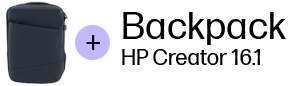
<style>
.page{position:relative;width:296px;height:86px;background:#ffffff}
.page>*{position:absolute;margin:0}
.t1{font:38px "FormaDJRMicro-Regular";color:#000000}
.t2{font:30px "FormaDJRMicro-Regular";color:#000000}
.t3{font:22px "FormaDJRMicro-Regular";color:#000000}
</style>
<div class="page">
<p class="t1" style="left:123px;top:12px;width:163px;height:33px">Backpack</p>
<p class="t2" style="left:86px;top:35px;width:14px;height:15px">+</p>
<p class="t3" style="left:122px;top:49px;width:138px;height:16px">HP Creator 16.1</p>
</div>
